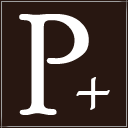
<style>
.page{position:relative;width:128px;height:128px;background:#281711}
.page>*{position:absolute;margin:0}
.t1{font:144px "PoorRichard-Regular";letter-spacing:-0.12em;color:#ffffff}
.t2{font:72px "PoorRichard-Regular";letter-spacing:-0.12em;color:#ffffff}
</style>
<div class="page">
<p class="t1" style="left:19px;top:14px;width:91px;height:101px">P<span class="t2">+</span></p>
</div>
